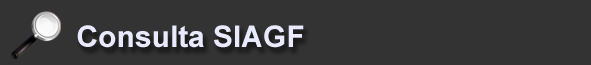
<style>
.page{position:relative;width:591px;height:65px;background:#333333}
.page>*{position:absolute;margin:0}
.t1{font:30px "Arial-BoldMT";color:#eaeafe}
</style>
<div class="page">
<p class="t1" style="left:77px;top:25px;width:227px;height:23px">Consulta SIAGF</p>
</div>
